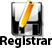
<style>
.page{position:relative;width:52px;height:48px;background:#ffffff}
.page>*{position:absolute;margin:0}
.t1{font:13px "MyriadPro-Bold";color:#010101}
</style>
<div class="page">
<p class="t1" style="left:0px;top:35px;width:53px;height:13px">Registrar</p>
</div>
